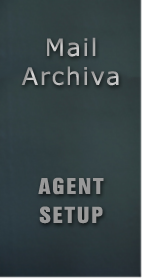
<style>
.page{position:relative;width:142px;height:280px}
.page>*{position:absolute;margin:0}
.t1{font:24px "Verdana";letter-spacing:0.2em;color:#ababab}
.t2{font:24px "NimbusSanT-BlacCond";letter-spacing:0.2em;color:#999999}
</style>
<div class="page">
<p class="t1" style="left:21px;top:37px;width:98px;height:49px;text-align:center">Mail <br><br><br>Archiva</p>
<p class="t2" style="left:38px;top:177px;width:66px;height:47px;text-align:center">AGENT<br><br><br>SETUP</p>
</div>
